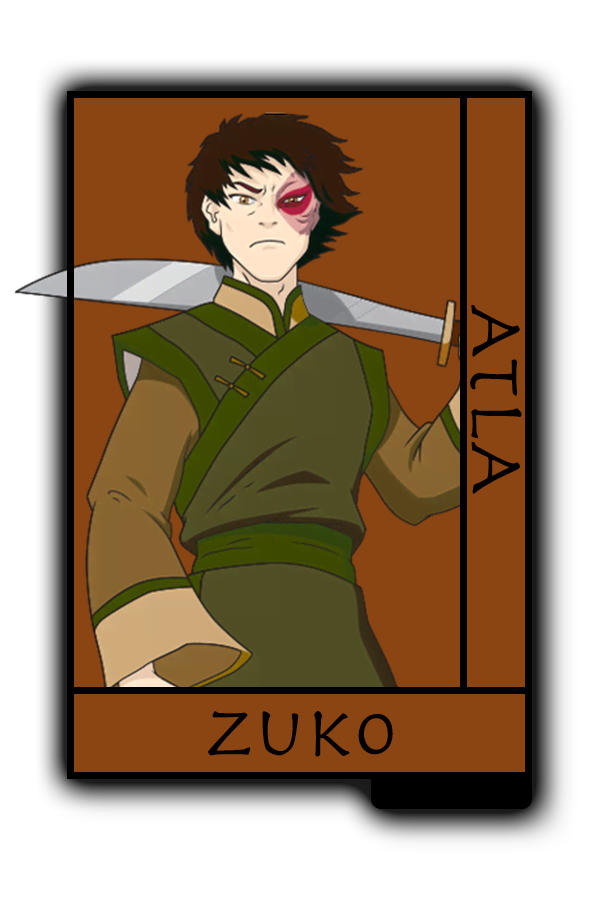
<style>
.page{position:relative;width:600px;height:900px;background:#8a4513}
.page>*{position:absolute;margin:0}
.t1{font:80.7px "Herculanum";color:#000000}
.t2{font:75px "Herculanum";color:#000000}
</style>
<div class="page">
<p class="t1" style="left:470px;top:305px;width:52px;height:189px;rotate:90deg">ATLA</p>
<p class="t2" style="left:208px;top:710px;width:185px;height:47px">zuko</p>
</div>
